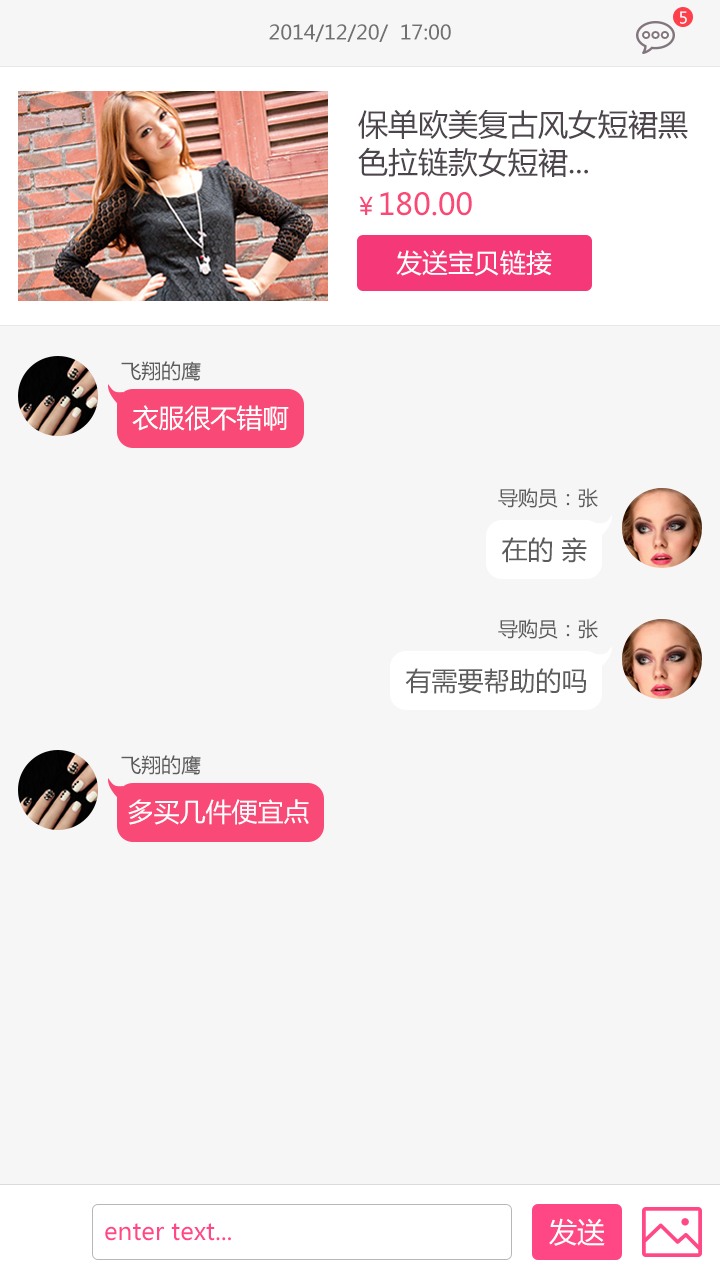
<style>
.page{position:relative;width:720px;height:1280px;background:#f7f6f6}
.page>*{position:absolute;margin:0}
.t1{font:16px "MicrosoftYaHei";color:#ffffff}
.t2{font:20px "MicrosoftYaHei";color:#707070}
.t3{font:30px/38px "MicrosoftYaHei";color:#4c454c}
.t4{font:30px "MicrosoftYaHei";color:#f94977}
.t5{font:24px "MicrosoftYaHei";color:#f94977}
.t6{font:26px "MicrosoftYaHei";color:#ffffff}
.t7{font:20px "MicrosoftYaHei";color:#5c5c5c}
.t8{font:26px "MicrosoftYaHei";color:#5c5c5c}
.t9{font:24px "MicrosoftYaHei";color:#ff4987}
.t10{font:28px "MicrosoftYaHei";color:#fffffe}
</style>
<div class="page">
<p class="t1" style="left:680px;top:11px;width:7px;height:13px">5</p>
<p class="t2" style="left:269px;top:24px;width:182px;height:18px">2014/12/20/  17:00</p>
<p class="t3" style="left:358px;top:109px;width:330px;height:69px">保单欧美复古风女短裙黑<br>色拉链款女短裙...</p>
<p class="t4" style="left:359px;top:192px;width:113px;height:24px"><span class="t5">￥</span>180.00</p>
<p class="t6" style="left:396px;top:250px;width:156px;height:26px">发送宝贝链接</p>
<p class="t7" style="left:121px;top:361px;width:80px;height:20px">飞翔的鹰</p>
<p class="t6" style="left:132px;top:405px;width:157px;height:26px">衣服很不错啊</p>
<p class="t7" style="left:498px;top:488px;width:100px;height:20px">导购员：张</p>
<p class="t8" style="left:501px;top:537px;width:86px;height:26px">在的 亲</p>
<p class="t7" style="left:498px;top:619px;width:100px;height:20px">导购员：张</p>
<p class="t8" style="left:405px;top:668px;width:181px;height:26px">有需要帮助的吗</p>
<p class="t7" style="left:121px;top:755px;width:80px;height:20px">飞翔的鹰</p>
<p class="t6" style="left:128px;top:799px;width:181px;height:26px">多买几件便宜点</p>
<p class="t9" style="left:105px;top:1223px;width:126px;height:18px">enter text...</p>
<p class="t10" style="left:549px;top:1218px;width:56px;height:28px">发送</p>
</div>
